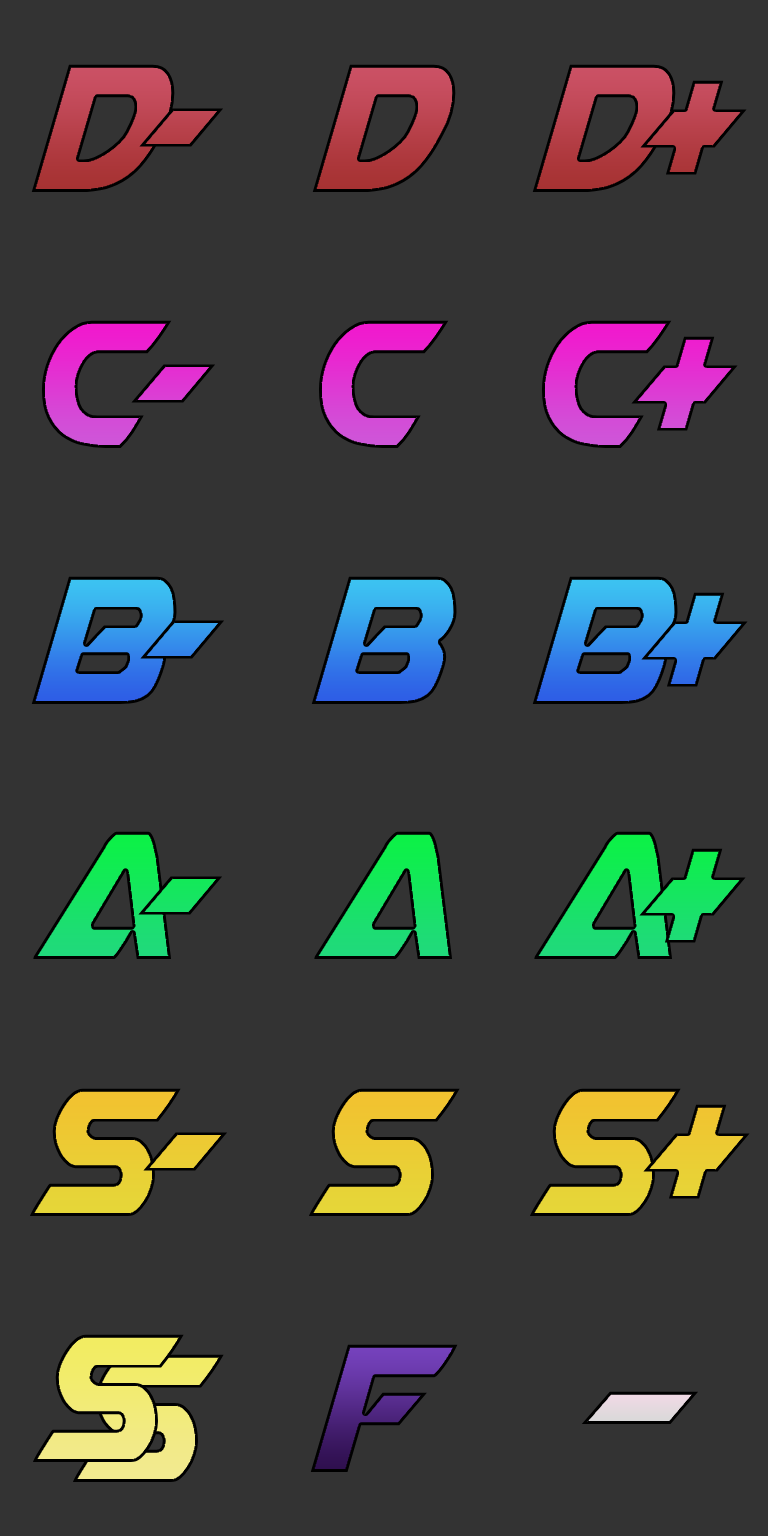
<style>
.page{position:relative;width:768px;height:1536px;background:#333333}
.page>*{position:absolute;margin:0}
.t1{font:240px "AirstrikeCondensed"}
.t2{font:280px "AirstrikeCondensed";color:#b63f48}
.t3{font:280px "AirstrikeCondensed";color:#dd33d2}
.t4{font:280px "AirstrikeCondensed";color:#de33d2}
.t5{font:280px "AirstrikeCondensed"}
.t6{font:280px "AirstrikeCondensed";color:#15e35d}
.t7{font:280px "AirstrikeCondensed";color:#15e45e}
.t8{font:240px "AirstrikeCondensed";color:#eac933}
.t9{font:280px "AirstrikeCondensed";color:#ebcb33}
.t10{font:313.3px "AirstrikeCondensed";color:#e1d9dd;scale:1.53 1}
</style>
<div class="page">
<p class="t1" style="left:31px;top:64px;width:144px;height:128px">D</p>
<p class="t1" style="left:312px;top:64px;width:144px;height:128px">D</p>
<p class="t1" style="left:532px;top:64px;width:144px;height:128px">D</p>
<p class="t2" style="left:640px;top:80px;width:107px;height:95px">+</p>
<p class="t1" style="left:41px;top:320px;width:131px;height:128px">C</p>
<p class="t1" style="left:318px;top:320px;width:131px;height:128px">C</p>
<p class="t1" style="left:541px;top:320px;width:131px;height:128px">C</p>
<p class="t3" style="left:631px;top:336px;width:107px;height:95px">+</p>
<p class="t4" style="left:131px;top:364px;width:84px;height:39px">-</p>
<p class="t1" style="left:31px;top:576px;width:146px;height:128px">B</p>
<p class="t1" style="left:311px;top:576px;width:146px;height:128px">B</p>
<p class="t1" style="left:532px;top:576px;width:146px;height:128px">B</p>
<p class="t5" style="left:641px;top:592px;width:107px;height:95px">+</p>
<p class="t1" style="left:33px;top:831px;width:139px;height:129px">A</p>
<p class="t1" style="left:314px;top:831px;width:139px;height:129px">A</p>
<p class="t1" style="left:534px;top:831px;width:139px;height:129px">A</p>
<p class="t6" style="left:639px;top:848px;width:107px;height:95px">+</p>
<p class="t7" style="left:138px;top:876px;width:84px;height:39px">-</p>
<p class="t8" style="left:29px;top:1088px;width:152px;height:128px">s</p>
<p class="t8" style="left:308px;top:1088px;width:152px;height:128px">s</p>
<p class="t8" style="left:529px;top:1088px;width:152px;height:128px">s</p>
<p class="t9" style="left:643px;top:1104px;width:107px;height:95px">+</p>
<p class="t9" style="left:143px;top:1132px;width:84px;height:39px">-</p>
<p class="t1" style="left:32px;top:1334px;width:152px;height:128px">s</p>
<p class="t1" style="left:310px;top:1344px;width:148px;height:128px">F</p>
<p class="t1" style="left:72px;top:1354px;width:152px;height:128px">s</p>
<p class="t10" style="left:581px;top:1391px;width:117px;height:33px">-</p>
</div>
